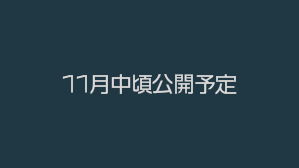
<style>
.page{position:relative;width:299px;height:168px;background:#203744}
.page>*{position:absolute;margin:0}
.t1{font:21px "VDL-Logona-Regular";color:#d9d9d9}
</style>
<div class="page">
<p class="t1" style="left:62px;top:74px;width:175px;height:21px">11月中頃公開予定</p>
</div>
